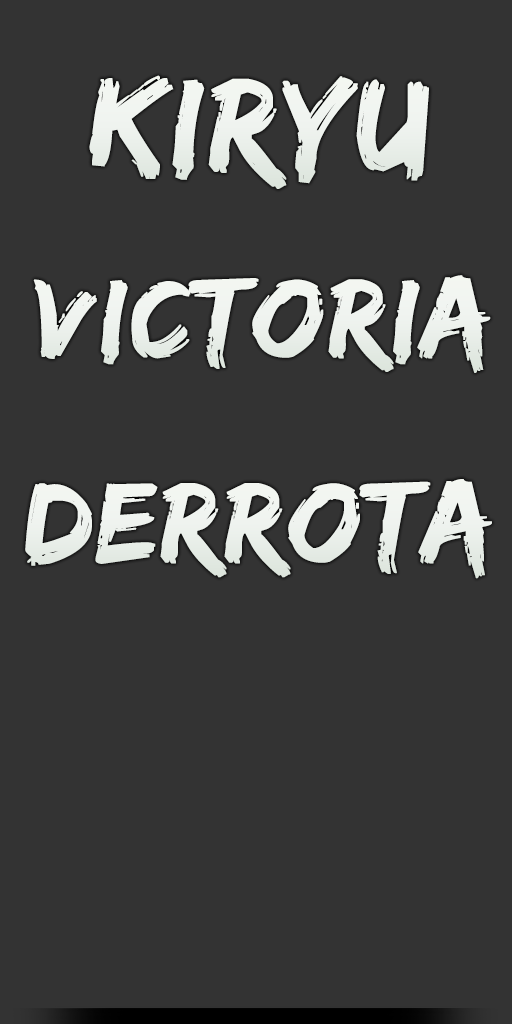
<style>
.page{position:relative;width:512px;height:1024px;background:#333333}
.page>*{position:absolute;margin:0}
.t1{font:138.9px "EdoSZ";color:#fefefe;font-weight:bold;scale:1.03 1}
.t2{font:116.4px "EdoSZ";color:#fefefe;font-weight:bold;scale:1.03 1}
.t3{font:118.4px "EdoSZ";color:#fefefe;font-weight:bold}
</style>
<div class="page">
<p class="t1" style="left:89px;top:75px;width:340px;height:114px">kiryu</p>
<p class="t2" style="left:33px;top:275px;width:458px;height:98px">victoria</p>
<p class="t3" style="left:25px;top:479px;width:467px;height:100px">derrota</p>
</div>
